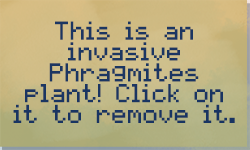
<style>
.page{position:relative;width:250px;height:150px}
.page>*{position:absolute;margin:0}
.t1{font:20.8px/20.8px "pixelmix";color:#1f3e71}
</style>
<div class="page">
<p class="t1" style="left:13px;top:21px;width:222px;height:102px;text-align:center">This is an invasive Phragmites plant! Click on it to remove it.</p>
</div>
